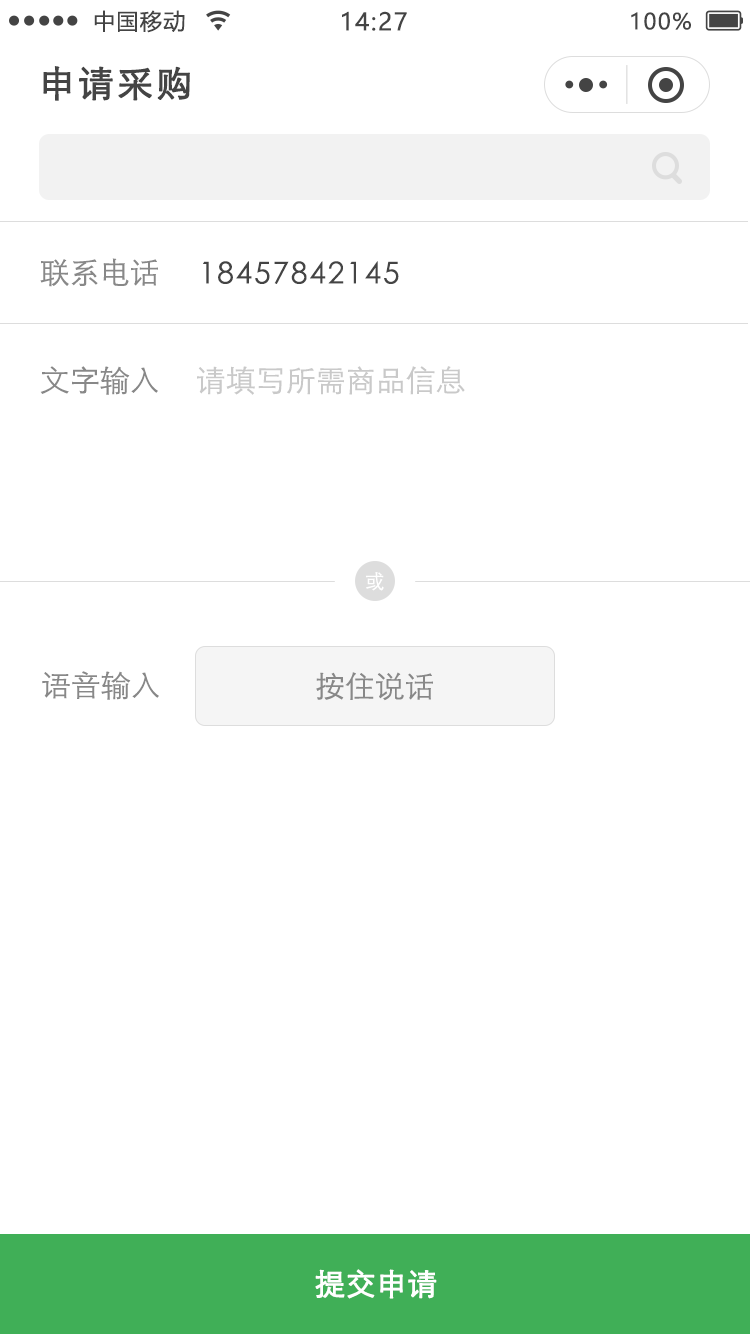
<style>
.page{position:relative;width:750px;height:1334px;background:#ffffff}
.page>*{position:absolute;margin:0}
.t1{font:22px "MicrosoftYaHei";letter-spacing:0.06em;color:#444444}
.t2{font:24px "MicrosoftYaHei";letter-spacing:0.06em;color:#444444}
.t3{font:36px "STXihei";letter-spacing:0.06em;color:#444444;font-weight:bold}
.t4{font:30px "STXihei";color:#888888}
.t5{font:30px "STXihei";letter-spacing:0.06em;color:#444444}
.t6{font:30px "STXihei";color:#c9c9c9}
.t7{font:20px "STXihei";color:#ffffff}
.t8{font:30px "STXihei";color:#ffffff;font-weight:bold}
</style>
<div class="page">
<p class="t1" style="left:94px;top:10px;width:91px;height:23px">中国移动</p>
<p class="t2" style="left:342px;top:11px;width:65px;height:20px">14:27</p>
<p class="t1" style="left:631px;top:12px;width:60px;height:18px">100%</p>
<p class="t3" style="left:43px;top:66px;width:147px;height:35px">申请采购</p>
<p class="t4" style="left:40px;top:258px;width:118px;height:29px">联系电话</p>
<p class="t5" style="left:203px;top:261px;width:196px;height:23px">18457842145</p>
<p class="t4" style="left:40px;top:366px;width:118px;height:29px">文字输入</p>
<p class="t6" style="left:197px;top:366px;width:268px;height:29px">请填写所需商品信息</p>
<p class="t7" style="left:366px;top:572px;width:18px;height:19px">或</p>
<p class="t4" style="left:42px;top:671px;width:117px;height:29px">语音输入</p>
<p class="t4" style="left:316px;top:672px;width:117px;height:29px">按住说话</p>
<p class="t8" style="left:315px;top:1269px;width:122px;height:30px">提交申请</p>
</div>
